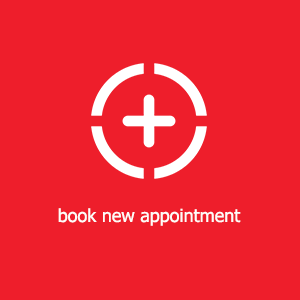
<style>
.page{position:relative;width:300px;height:300px;background:#ee1e2b}
.page>*{position:absolute;margin:0}
.t1{font:18px "Tahoma";color:#fefcf9}
</style>
<div class="page">
<p class="t1" style="left:58px;top:208px;width:183px;height:18px">book new appointment</p>
</div>
